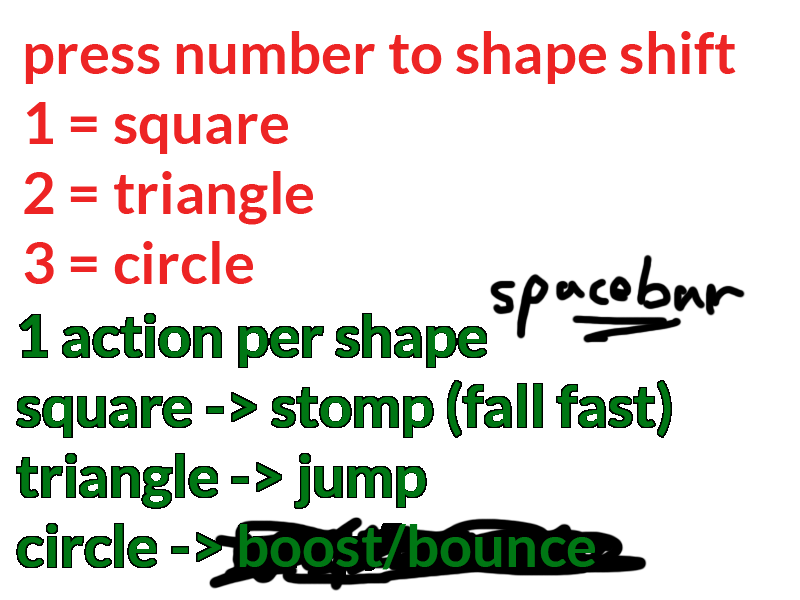
<style>
.page{position:relative;width:800px;height:600px;background:#ffffff}
.page>*{position:absolute;margin:0}
.t1{font:58.3px "Lato-Bold";color:#ed2424}
.t2{font:58.3px "Lato-Bold";color:#007714}
</style>
<div class="page">
<p class="t1" style="left:24px;top:31px;width:712px;height:253px">press number to shape shift<br>1 = square<br>2 = triangle<br>3 = circle</p>
<p class="t2" style="left:17px;top:314px;width:654px;height:256px">1 action per shape<br>square -&gt; stomp (fall fast)<br>triangle -&gt; jump<br>circle -&gt; boost/bounce</p>
</div>
